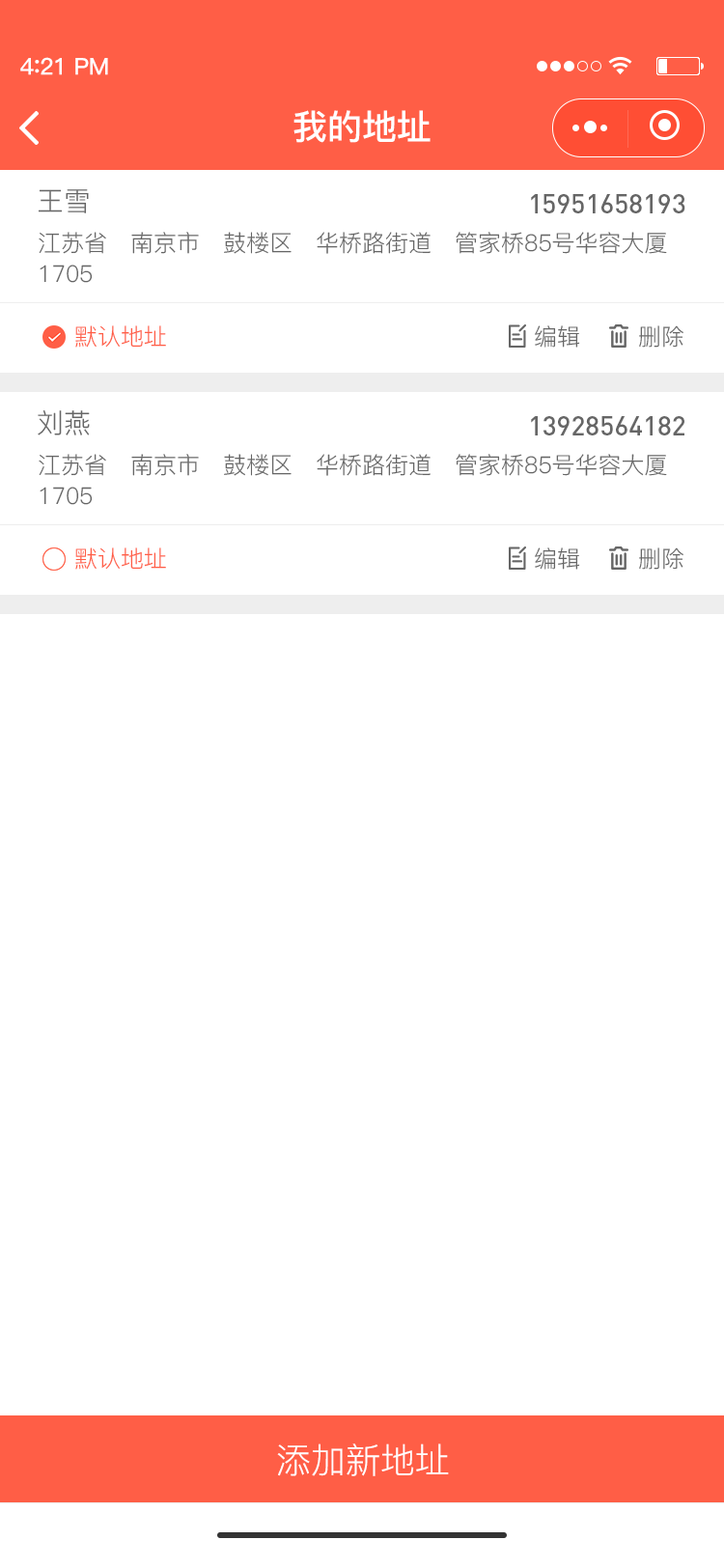
<style>
.page{position:relative;width:724px;height:1568px;background:#ffffff}
.page>*{position:absolute;margin:0}
.t1{font:23.2px "PingFang-SC-Bold";letter-spacing:-0.02em;color:#fefefe}
.t2{font:25.1px "PingFang-SC-Bold";letter-spacing:-0.02em;color:#fefefe}
.t3{font:34.8px "PingFang-SC-Bold";color:#ffffff}
.t4{font:27px "PingFang-SC-Regular";color:#666666}
.t5{font:27px "DIN-Medium";color:#666666}
.t6{font:23.2px/34.8px "PingFang-SC-Regular";color:#666666}
.t7{font:23.2px "PingFang-SC-Regular";color:#ff5e46}
.t8{font:23.2px "PingFang-SC-Regular";color:#666666}
.t9{font:34.8px "PingFang-SC-Regular";color:#ffffff}
</style>
<div class="page">
<p class="t1" style="left:20px;top:57px;width:88px;height:18px">4<span class="t2">:</span>21 PM</p>
<p class="t3" style="left:294px;top:110px;width:137px;height:33px">我的地址</p>
<p class="t4" style="left:38px;top:189px;width:51px;height:24px">王雪</p>
<p class="t5" style="left:531px;top:194px;width:155px;height:19px">15951658193</p>
<p class="t6" style="left:39px;top:232px;width:628px;height:51px">江苏省   南京市   鼓楼区   华桥路街道   管家桥85号华容大厦<br>1705</p>
<p class="t7" style="left:75px;top:325px;width:91px;height:23px">默认地址</p>
<p class="t8" style="left:535px;top:325px;width:45px;height:23px">编辑</p>
<p class="t8" style="left:639px;top:325px;width:45px;height:23px">删除</p>
<p class="t4" style="left:38px;top:410px;width:52px;height:25px">刘燕</p>
<p class="t5" style="left:531px;top:416px;width:154px;height:19px">13928564182</p>
<p class="t6" style="left:39px;top:454px;width:628px;height:51px">江苏省   南京市   鼓楼区   华桥路街道   管家桥85号华容大厦<br>1705</p>
<p class="t7" style="left:75px;top:547px;width:91px;height:23px">默认地址</p>
<p class="t8" style="left:535px;top:547px;width:45px;height:23px">编辑</p>
<p class="t8" style="left:639px;top:547px;width:45px;height:23px">删除</p>
<p class="t9" style="left:277px;top:1443px;width:172px;height:33px">添加新地址</p>
</div>
